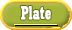
<style>
.page{position:relative;width:72px;height:30px}
.page>*{position:absolute;margin:0}
.t1{font:18px "Rockwell-Condensed";color:#ffffff;font-weight:bold}
</style>
<div class="page">
<p class="t1" style="left:20px;top:6px;width:31px;height:14px">Plate</p>
</div>
